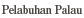
<style>
.page{position:relative;width:84px;height:18px;background:#ffffff}
.page>*{position:absolute;margin:0}
.t1{font:12px "RyuminPro-ExBold";letter-spacing:-0.04em;color:#4c4843;scale:0.9 1}
</style>
<div class="page">
<p class="t1" style="left:1px;top:5px;width:81px;height:9px">Pelabuhan Palau</p>
</div>
